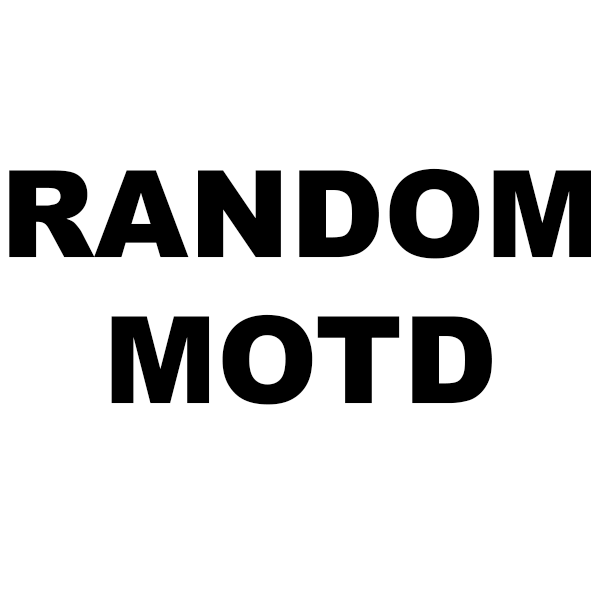
<style>
.page{position:relative;width:600px;height:600px;background:#ffffff}
.page>*{position:absolute;margin:0}
.t1{font:121.4px "Arial-Black";color:#000000}
</style>
<div class="page">
<p class="t1" style="left:9px;top:168px;width:582px;height:237px;text-align:center">RANDOM<br>MOTD</p>
</div>
